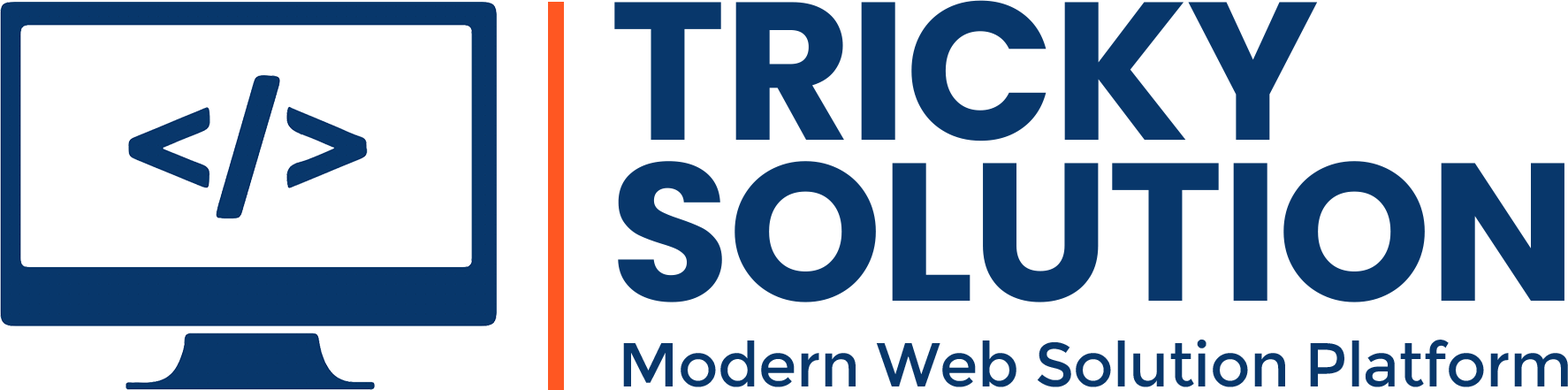
<style>
.page{position:relative;width:1568px;height:390px;background:#ffffff}
.page>*{position:absolute;margin:0}
.t1{font:195.8px/160.3px "Poppins-Bold";letter-spacing:-0.01em;color:#08376b}
.t2{font:61.8px "Montserrat-Regular";letter-spacing:-0.01em;color:#08376b}
</style>
<div class="page">
<p class="t1" style="left:614px;top:0px;width:950px;height:302px">TRICKY<br>SOLUTION</p>
<p class="t2" style="left:623px;top:339px;width:945px;height:48px">Modern Web Solution Platform</p>
</div>
